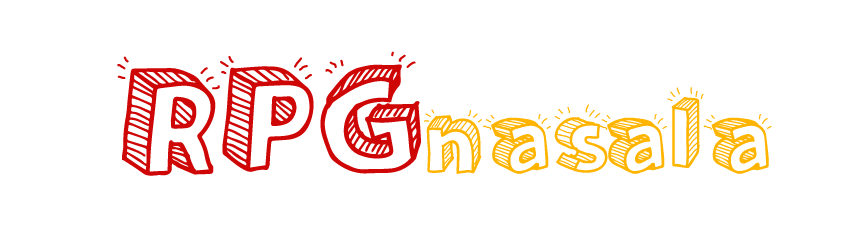
<style>
.page{position:relative;width:863px;height:237px;background:#ffffff}
.page>*{position:absolute;margin:0}
.t1{font:100px "Sketch3D";color:#ffb400}
.t2{font:150px "Sketch3D";color:#cf0606}
</style>
<div class="page">
<p class="t1" style="left:117px;top:51px;width:655px;height:125px"><span class="t2">RPG</span>nasala</p>
</div>
